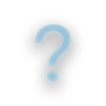
<style>
.page{position:relative;width:106px;height:106px;background:#ffffff}
.page>*{position:absolute;margin:0}
.t1{font:39.6px "PingFangSC-Medium";letter-spacing:-0.019em;color:#a4c9db}
</style>
<div class="page">
<p class="t1" style="left:35px;top:24px;width:36px;height:58px">?</p>
</div>
